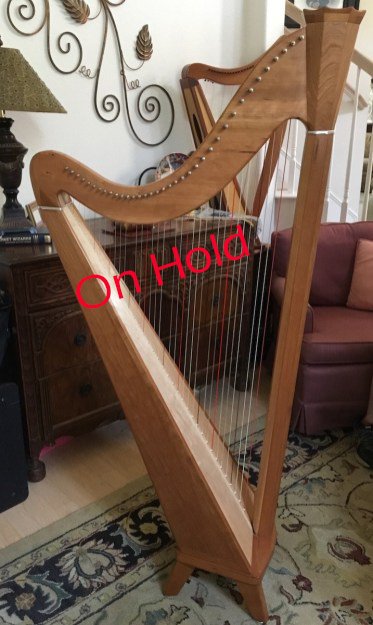
<style>
.page{position:relative;width:373px;height:625px}
.page>*{position:absolute;margin:0}
.t1{font:48px "ErasITC-Medium";color:#f3022a}
</style>
<div class="page">
<p class="t1" style="left:76px;top:224px;width:174px;height:85px;rotate:-19deg">On Hold</p>
</div>
